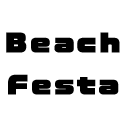
<style>
.page{position:relative;width:128px;height:128px;background:#ffffff}
.page>*{position:absolute;margin:0}
.t1{font:24px "VDL-LogoJrBlack-Black";letter-spacing:0.1em;color:#000000;font-weight:bold}
</style>
<div class="page">
<p class="t1" style="left:6px;top:32px;width:114px;height:63px;text-align:center">Beach<br>Festa</p>
</div>
